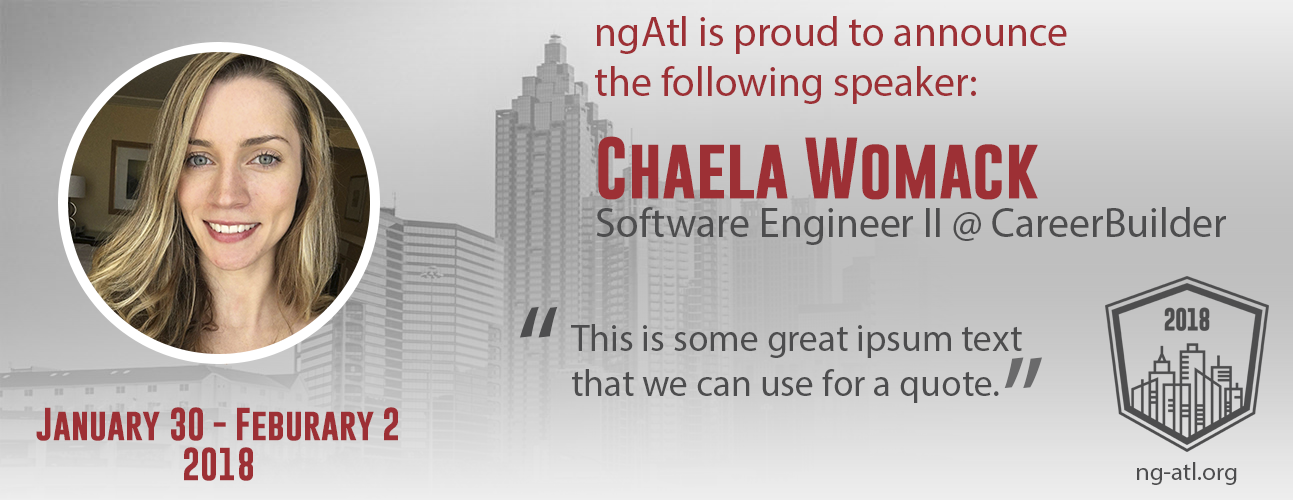
<style>
.page{position:relative;width:1293px;height:500px}
.page>*{position:absolute;margin:0}
.t1{font:41.7px "MyriadPro-Regular";color:#9d3035}
.t2{font:62.5px "GoboldBold";color:#9d3035}
.t3{font:41.7px "MyriadPro-Regular";color:#4d4d4e}
.t4{font:125px "MyriadPro-Regular";color:#4d4d4e}
.t5{font:37.5px "MyriadPro-Regular";color:#4d4d4e}
.t6{font:125px "MyriadPro-Regular";color:#6a6a6b}
.t7{font:33.3px "GoboldBold";color:#9d3035}
.t8{font:25px "MyriadPro-Regular";color:#4d4d4e}
</style>
<div class="page">
<p class="t1" style="left:595px;top:16px;width:472px;height:88px">ngAtl is proud to announce the following speaker:</p>
<p class="t2" style="left:598px;top:136px;width:440px;height:64px">Chaela Womack</p>
<p class="t3" style="left:596px;top:207px;width:630px;height:38px">Software Engineer II @ CareerBuilder</p>
<p class="t4" style="left:520px;top:306px;width:38px;height:32px">“</p>
<p class="t5" style="left:571px;top:324px;width:451px;height:79px">This is some great ipsum text that we can use for a quote.</p>
<p class="t6" style="left:1004px;top:357px;width:38px;height:32px;rotate:180deg">“</p>
<p class="t7" style="left:36px;top:407px;width:362px;height:74px;text-align:center">January 30 - Feburary 2 <br>2018</p>
<p class="t8" style="left:1137px;top:462px;width:100px;height:23px">ng-atl.org</p>
</div>
